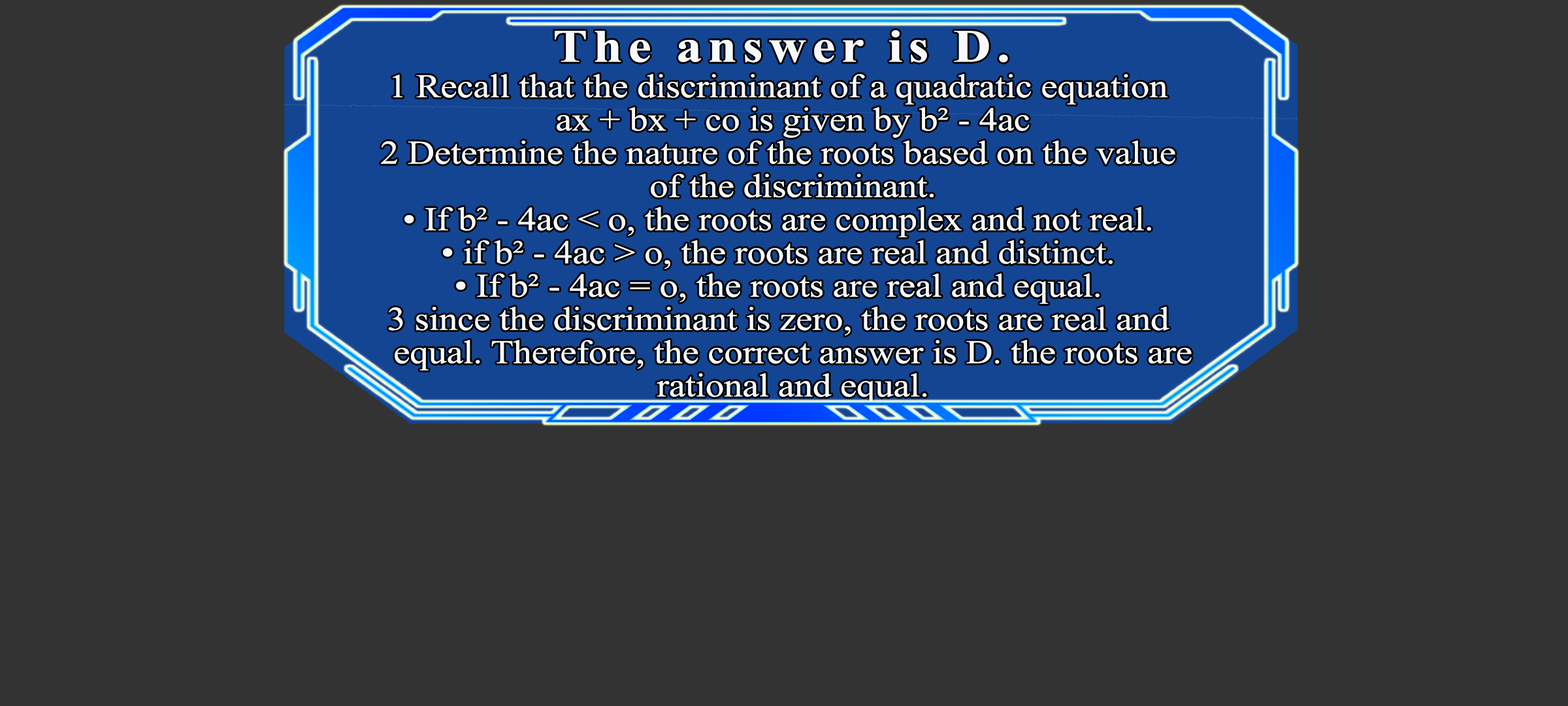
<style>
.page{position:relative;width:1568px;height:706px;background:#333333}
.page>*{position:absolute;margin:0}
.t1{font:46.3px "TimesNewRomanPS-BoldMT";letter-spacing:0.115em;color:#f7f9fb;scale:1.12 1}
.t2{font:33.2px/33.2px "TimesNewRomanPSMT";letter-spacing:-0.005em;color:#f7f9fb;scale:1.12 1}
</style>
<div class="page">
<p class="t1" style="left:555px;top:30px;width:453px;height:33px">The answer is D.</p>
<p class="t2" style="left:381px;top:74px;width:811px;height:330px;text-align:center">1 Recall that the discriminant of a quadratic equation<br>  ax + bx + co is given by b² - 4ac<br>2 Determine the nature of the roots based on the value<br>  of the discriminant.<br>• If b² - 4ac &lt; o, the roots are complex and not real.<br>• if b² - 4ac &gt; o, the roots are real and distinct.<br>• If b² - 4ac = o, the roots are real and equal.<br>3 since the discriminant is zero, the roots are real and<br>  equal. Therefore, the correct answer is D. the roots are<br>  rational and equal.</p>
</div>
